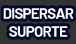
<style>
.page{position:relative;width:76px;height:44px;background:#333333}
.page>*{position:absolute;margin:0}
.t1{font:15px "Barlow-Bold";letter-spacing:-0.05em;color:#ffffff}
</style>
<div class="page">
<p class="t1" style="left:3px;top:8px;width:71px;height:29px;text-align:center">DISPERSAR<br>SUPORTE</p>
</div>
